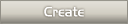
<style>
.page{position:relative;width:128px;height:24px}
.page>*{position:absolute;margin:0}
.t1{font:14px "HandelGotD-Ligh";color:#ffffff}
</style>
<div class="page">
<p class="t1" style="left:44px;top:7px;width:40px;height:10px">Create</p>
</div>
